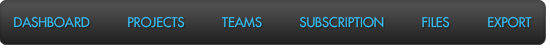
<style>
.page{position:relative;width:550px;height:48px}
.page>*{position:absolute;margin:0}
.t1{font:13px "FuturaStd-Medium";color:#3ab9ec;text-transform:uppercase}
</style>
<div class="page">
<p class="t1" style="left:14px;top:16px;width:518px;height:12px">Dashboard          Projects          Teams          SUBSCRIPTION          FILES          Export</p>
</div>
